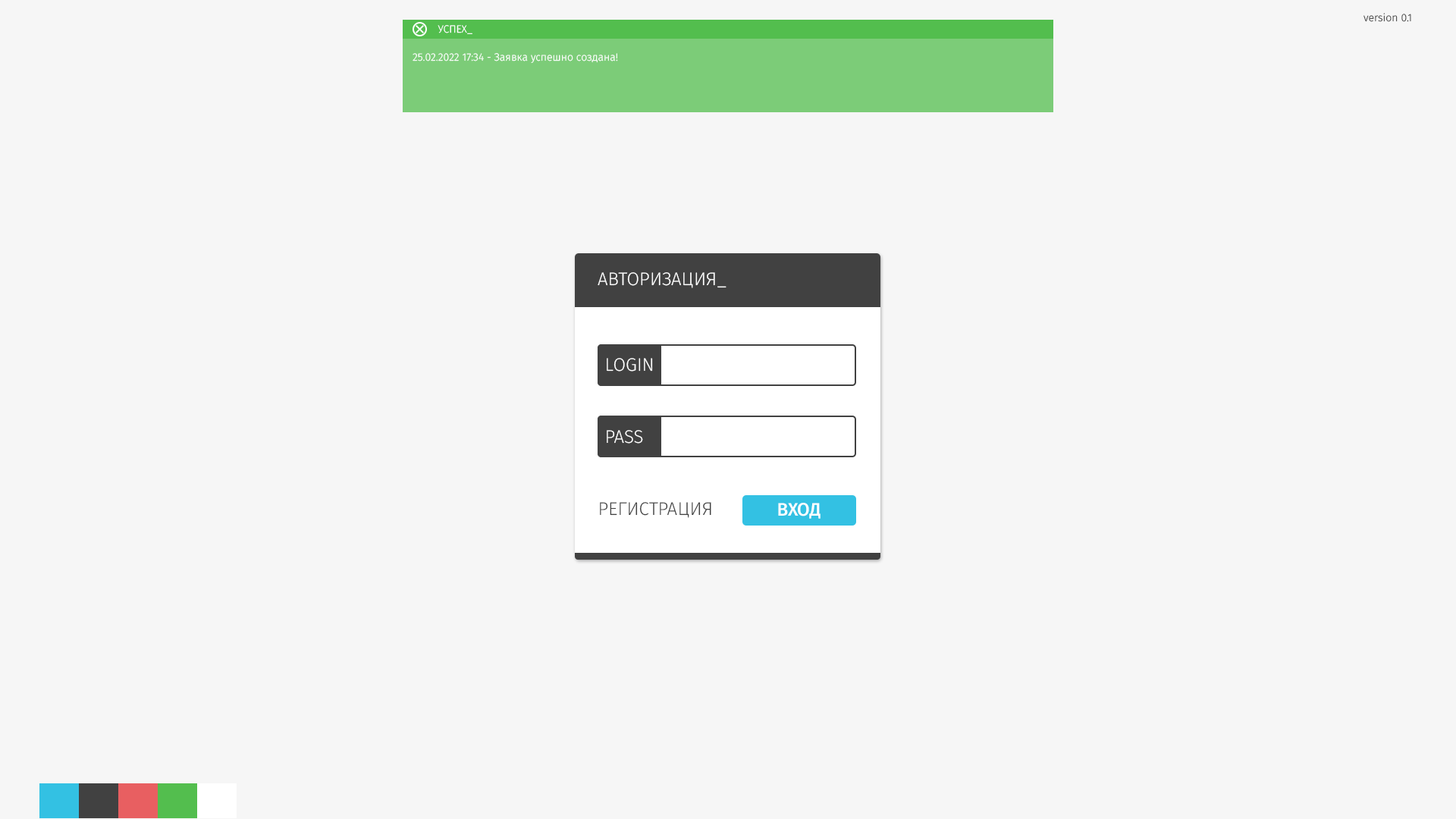
<style>
.page{position:relative;width:1456px;height:819px;background:#f6f6f6}
.page>*{position:absolute;margin:0}
.t1{font:10.6px "FiraSans-Light";color:#414141}
.t2{font:10.6px "FiraSans-Light";color:#ffffff;text-transform:uppercase}
.t3{font:10.6px "FiraSans-Light";color:#ffffff}
.t4{font:18.2px "FiraSans-Light";color:#ffffff;text-transform:uppercase}
.t5{font:18.2px "FiraSans-Light";color:#414141;text-transform:uppercase}
.t6{font:18.2px "FiraSans-Medium";color:#ffffff;text-transform:uppercase}
</style>
<div class="page">
<p class="t1" style="left:1363px;top:13px;width:48px;height:9px">version 0.1</p>
<p class="t2" style="left:438px;top:25px;width:34px;height:9px">Успех_</p>
<p class="t3" style="left:413px;top:53px;width:205px;height:10px">25.02.2022 17:34 - Заявка успешно создана!</p>
<p class="t4" style="left:598px;top:272px;width:128px;height:16px">Авторизация_</p>
<p class="t4" style="left:607px;top:358px;width:46px;height:14px">Login</p>
<p class="t4" style="left:607px;top:430px;width:36px;height:14px">Pass</p>
<p class="t5" style="left:600px;top:502px;width:111px;height:16px">Регистрация</p>
<p class="t6" style="left:778px;top:503px;width:43px;height:16px">Вход</p>
</div>
